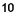
<style>
.page{position:relative;width:16px;height:16px;background:#ffffff}
.page>*{position:absolute;margin:0}
.t1{font:12px "TrebuchetMS";color:#000000}
</style>
<div class="page">
<p class="t1" style="left:2px;top:3px;width:12px;height:9px">10</p>
</div>
